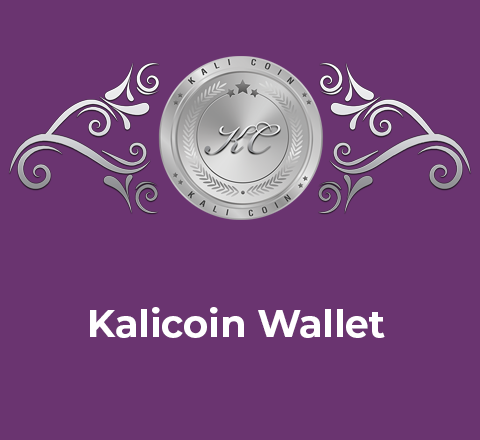
<style>
.page{position:relative;width:480px;height:440px;background:#6a3470}
.page>*{position:absolute;margin:0}
.t1{font:38px "Montserrat-Bold";color:#ffffff}
</style>
<div class="page">
<p class="t1" style="left:90px;top:307px;width:295px;height:31px">Kalicoin Wallet</p>
</div>
